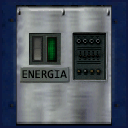
<style>
.page{position:relative;width:128px;height:128px}
.page>*{position:absolute;margin:0}
.t1{font:12px "Consolas";letter-spacing:-0.01em;color:#000000}
</style>
<div class="page">
<p class="t1" style="left:22px;top:70px;width:45px;height:9px">ENERGIA</p>
</div>
